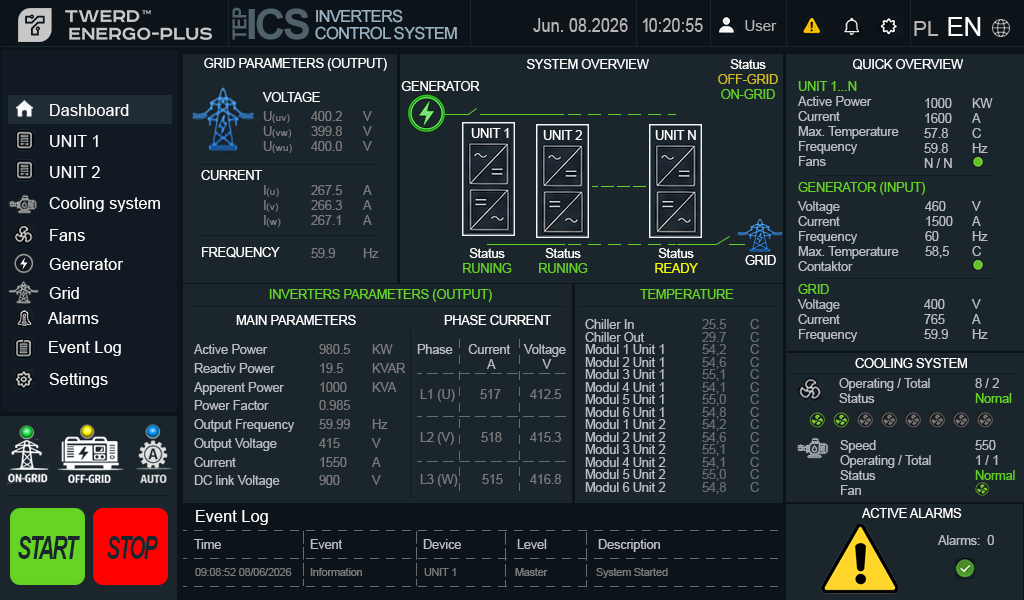
<style>
.page{position:relative;width:1024px;height:600px;background:#1a252c}
.page>*{position:absolute;margin:0}
.t1{font:19.1px "Arial-BoldMT";letter-spacing:-0.05em;color:#51616b;scale:0.94 1}
.t2{font:41.7px "Arial-BoldMT";letter-spacing:-0.05em;color:#51616b}
.t3{font:16.7px/16.7px "ArialMT";letter-spacing:-0.05em;color:#9ab2c1}
.t4{font:25.7px "ArialMT";color:#ffffff}
.t5{font:19px "ArialMT";color:#b9b5b5;scale:0.86 1}
.t6{font:15px "ArialMT";color:#b9b5b5}
.t7{font:21px "ArialMT";color:#b9b5b5}
.t8{font:12.5px "ArialMT";color:#ffffff}
.t9{font:12.5px "ArialMT";color:#d1bb26}
.t10{font:12.5px "ArialMT";color:#65d126}
.t11{font:12.5px "ArialMT";color:#b9bdc1}
.t12{font:16.4px "ArialMT";color:#ffffff}
.t13{font:10.4px "ArialMT";color:#7b7a7b}
.t14{font:12.5px "ArialMT";color:#7b7a7b}
.t15{font:12.5px "ArialMT";color:#f6ff02}
.t16{font:12.5px "ArialMT";color:#65d424}
.t17{font:12.5px/12.5px "ArialMT";color:#b9bdc1}
.t18{font:12.5px/12.5px "ArialMT";color:#676d71}
.t19{font:12.5px/18.7px "ArialMT";color:#b9bdc1}
.t20{font:12.5px/18.7px "ArialMT";color:#7b7a7b}
.t21{font:12.5px "ArialMT";color:#63cf24}
.t22{font:32.4px "Arial-BoldItalicMT";letter-spacing:-0.075em;color:#1a252c;scale:0.63 1}
.t23{font:10.5px "ArialMT";color:#7b7a7b}
</style>
<div class="page">
<p class="t1" style="left:232px;top:7px;width:15px;height:33px;rotate:-90deg">TEP</p>
<p class="t2" style="left:248px;top:8px;width:61px;height:32px">ICS</p>
<p class="t3" style="left:315px;top:9px;width:142px;height:31px">INVERTERS <br>CONTROL SYSTEM</p>
<p class="t4" style="left:948px;top:17px;width:33px;height:19px">EN</p>
<p class="t5" style="left:533px;top:18px;width:95px;height:14px">Jun. 08.2026</p>
<p class="t5" style="left:642px;top:18px;width:61px;height:14px">10:20:55</p>
<p class="t6" style="left:745px;top:20px;width:32px;height:11px">User</p>
<p class="t7" style="left:914px;top:21px;width:25px;height:15px">PL</p>
<p class="t8" style="left:204px;top:58px;width:183px;height:13px">GRID PARAMETERS (OUTPUT)</p>
<p class="t8" style="left:527px;top:59px;width:122px;height:10px">SYSTEM OVERVIEW</p>
<p class="t9" style="left:718px;top:59px;width:60px;height:40px;text-align:center"><span class="t8">Status<br></span>OFF-GRID<br><span class="t10">ON-GRID</span></p>
<p class="t8" style="left:853px;top:59px;width:110px;height:11px">QUICK OVERVIEW</p>
<p class="t8" style="left:401px;top:81px;width:79px;height:10px">GENERATOR</p>
<p class="t10" style="left:798px;top:81px;width:59px;height:10px">UNIT 1...N</p>
<p class="t8" style="left:262px;top:92px;width:58px;height:10px">VOLTAGE</p>
<p class="t11" style="left:798px;top:96px;width:101px;height:70px">Active Power <br>Current <br>Max. Temperature<br>Frequency<br>Fans</p>
<p class="t11" style="left:924px;top:98px;width:28px;height:70px">1000<br>1600 <br>57.8 <br>59.8 <br>N / N</p>
<p class="t11" style="left:972px;top:98px;width:21px;height:55px">KW <br>A <br>C <br>Hz</p>
<p class="t12" style="left:50px;top:104px;width:79px;height:12px">Dashboard</p>
<p class="t13" style="left:263px;top:111px;width:29px;height:42px"><span class="t14">U</span>(uv) <br><span class="t14">U</span>(vw) <br><span class="t14">U</span>(wu)</p>
<p class="t14" style="left:311px;top:111px;width:31px;height:40px">400.2<br>399.8<br>400.0</p>
<p class="t14" style="left:362px;top:111px;width:10px;height:40px">V<br>V<br>V</p>
<p class="t12" style="left:50px;top:135px;width:48px;height:12px">UNIT 1</p>
<p class="t8" style="left:471px;top:128px;width:38px;height:10px">UNIT 1</p>
<p class="t8" style="left:543px;top:130px;width:39px;height:10px">UNIT 2</p>
<p class="t8" style="left:655px;top:130px;width:41px;height:10px">UNIT N</p>
<p class="t12" style="left:50px;top:166px;width:50px;height:12px">UNIT 2</p>
<p class="t8" style="left:201px;top:170px;width:61px;height:10px">CURRENT</p>
<p class="t13" style="left:264px;top:185px;width:17px;height:42px"><span class="t14">I</span>(u) <br><span class="t14">I</span>(v) <br><span class="t14">I</span>(w)</p>
<p class="t14" style="left:311px;top:185px;width:31px;height:40px">267.5<br>266.3<br>267.1</p>
<p class="t14" style="left:363px;top:185px;width:9px;height:40px">A<br>A<br>A</p>
<p class="t10" style="left:798px;top:182px;width:127px;height:13px">GENERATOR (INPUT)</p>
<p class="t12" style="left:49px;top:197px;width:111px;height:15px">Cooling system</p>
<p class="t11" style="left:797px;top:201px;width:102px;height:70px">Voltage<br>Current <br>Frequency<br>Max. Temperature<br>Contaktor</p>
<p class="t11" style="left:925px;top:201px;width:28px;height:57px">460<br>1500<br>60<br>58,5</p>
<p class="t11" style="left:971px;top:201px;width:17px;height:55px">V<br>A<br>Hz<br>C</p>
<p class="t12" style="left:50px;top:229px;width:35px;height:12px">Fans</p>
<p class="t8" style="left:202px;top:247px;width:78px;height:11px">FREQUENCY</p>
<p class="t14" style="left:311px;top:248px;width:24px;height:10px">59.9</p>
<p class="t14" style="left:363px;top:248px;width:16px;height:10px">Hz</p>
<p class="t8" style="left:463px;top:248px;width:49px;height:25px;text-align:center">Status<br><span class="t10">RUNING</span></p>
<p class="t8" style="left:539px;top:248px;width:49px;height:25px;text-align:center">Status<br><span class="t10">RUNING</span></p>
<p class="t8" style="left:655px;top:248px;width:43px;height:25px;text-align:center">Status<br><span class="t15">READY</span></p>
<p class="t8" style="left:745px;top:255px;width:31px;height:10px">GRID</p>
<p class="t12" style="left:49px;top:258px;width:74px;height:12px">Generator</p>
<p class="t12" style="left:49px;top:287px;width:30px;height:12px">Grid</p>
<p class="t16" style="left:269px;top:289px;width:223px;height:13px">INVERTERS PARAMETERS (OUTPUT)</p>
<p class="t16" style="left:640px;top:289px;width:94px;height:10px">TEMPERATURE</p>
<p class="t10" style="left:798px;top:284px;width:31px;height:10px">GRID</p>
<p class="t11" style="left:797px;top:299px;width:61px;height:43px">Voltage<br>Current <br>Frequency</p>
<p class="t11" style="left:924px;top:299px;width:24px;height:40px">400<br>765<br>59.9</p>
<p class="t11" style="left:971px;top:299px;width:17px;height:40px">V<br>A<br>Hz</p>
<p class="t12" style="left:48px;top:312px;width:51px;height:12px">Alarms</p>
<p class="t8" style="left:236px;top:315px;width:120px;height:10px">MAIN PARAMETERS</p>
<p class="t8" style="left:444px;top:315px;width:107px;height:10px">PHASE CURRENT</p>
<p class="t17" style="left:585px;top:319px;width:81px;height:173px">Chiller In <br>Chiller Out<br>Modul 1 Unit 1<br>Modul 2 Unit 1<br>Modul 3 Unit 1<br>Modul 4 Unit 1<br>Modul 5 Unit 1<br>Modul 6 Unit 1<br>Modul 1 Unit 2<br>Modul 2 Unit 2<br>Modul 3 Unit 2<br>Modul 4 Unit 2<br>Modul 5 Unit 2<br>Modul 6 Unit 2</p>
<p class="t18" style="left:702px;top:319px;width:24px;height:175px">25.5 <br>29.7<br>54,2<br>54,6<br>55,1<br>54,1<br>55,0<br>54,8<br>54,2<br>54,6<br>55,1<br>54,1<br>55,0<br>54,8</p>
<p class="t18" style="left:750px;top:319px;width:9px;height:173px">C<br>C<br>C<br>C<br>C<br>C<br>C<br>C<br>C<br>C<br>C<br>C<br>C<br>C</p>
<p class="t12" style="left:49px;top:341px;width:72px;height:15px">Event Log</p>
<p class="t19" style="left:194px;top:344px;width:101px;height:144px">Active Power<br>Reactiv Power <br>Apperent Power<br>Power Factor<br>Output Frequency<br>Output Voltage<br>Current <br>DC link Voltage</p>
<p class="t20" style="left:319px;top:344px;width:31px;height:141px">980.5<br>19.5 <br>1000<br>0.985<br>59.99<br>415<br>1550 <br>900</p>
<p class="t20" style="left:371px;top:344px;width:35px;height:141px">KW<br>KVAR <br>KVA<br><br>Hz<br>V<br>A <br>V</p>
<p class="t11" style="left:417px;top:344px;width:36px;height:10px">Phase</p>
<p class="t11" style="left:468px;top:344px;width:43px;height:25px;text-align:center">Current <br>A</p>
<p class="t11" style="left:523px;top:344px;width:43px;height:25px;text-align:center">Voltage<br> V</p>
<p class="t8" style="left:855px;top:358px;width:112px;height:10px">COOLING SYSTEM</p>
<p class="t12" style="left:49px;top:373px;width:59px;height:15px">Settings</p>
<p class="t14" style="left:420px;top:389px;width:35px;height:13px">L1 (U)</p>
<p class="t14" style="left:480px;top:389px;width:21px;height:10px">517</p>
<p class="t14" style="left:530px;top:389px;width:31px;height:10px">412.5</p>
<p class="t11" style="left:839px;top:378px;width:91px;height:25px">Operating / Total <br>Status</p>
<p class="t16" style="left:975px;top:378px;width:37px;height:25px"><span class="t11">8 / 2<br></span>Nornal</p>
<p class="t14" style="left:420px;top:432px;width:34px;height:13px">L2 (V)</p>
<p class="t14" style="left:481px;top:432px;width:21px;height:10px">518</p>
<p class="t14" style="left:530px;top:432px;width:31px;height:10px">415.3</p>
<p class="t11" style="left:840px;top:440px;width:91px;height:55px">Speed<br>Operating / Total <br>Status<br>Fan</p>
<p class="t11" style="left:975px;top:440px;width:40px;height:40px">550<br>1 / 1<br><span class="t21">Normal</span></p>
<p class="t14" style="left:420px;top:474px;width:38px;height:13px">L3 (W)</p>
<p class="t14" style="left:482px;top:474px;width:21px;height:10px">515</p>
<p class="t14" style="left:530px;top:474px;width:31px;height:10px">416.8</p>
<p class="t12" style="left:196px;top:510px;width:72px;height:15px">Event Log</p>
<p class="t8" style="left:862px;top:508px;width:100px;height:10px">ACTIVE ALARMS</p>
<p class="t22" style="left:18px;top:536px;width:62px;height:23px">START</p>
<p class="t22" style="left:107px;top:536px;width:51px;height:23px">STOP</p>
<p class="t11" style="left:194px;top:539px;width:27px;height:10px">Time</p>
<p class="t11" style="left:310px;top:539px;width:33px;height:10px">Event</p>
<p class="t11" style="left:423px;top:539px;width:38px;height:10px">Device</p>
<p class="t11" style="left:517px;top:539px;width:30px;height:10px">Level</p>
<p class="t11" style="left:598px;top:539px;width:62px;height:13px">Description</p>
<p class="t11" style="left:938px;top:535px;width:56px;height:10px">Alarms:  0</p>
<p class="t23" style="left:195px;top:568px;width:97px;height:8px">09:08:52 08/06/2026</p>
<p class="t23" style="left:310px;top:568px;width:52px;height:8px">Information</p>
<p class="t23" style="left:424px;top:568px;width:32px;height:8px">UNIT 1</p>
<p class="t23" style="left:515px;top:568px;width:33px;height:8px">Master</p>
<p class="t23" style="left:596px;top:568px;width:72px;height:10px">System Started</p>
</div>
